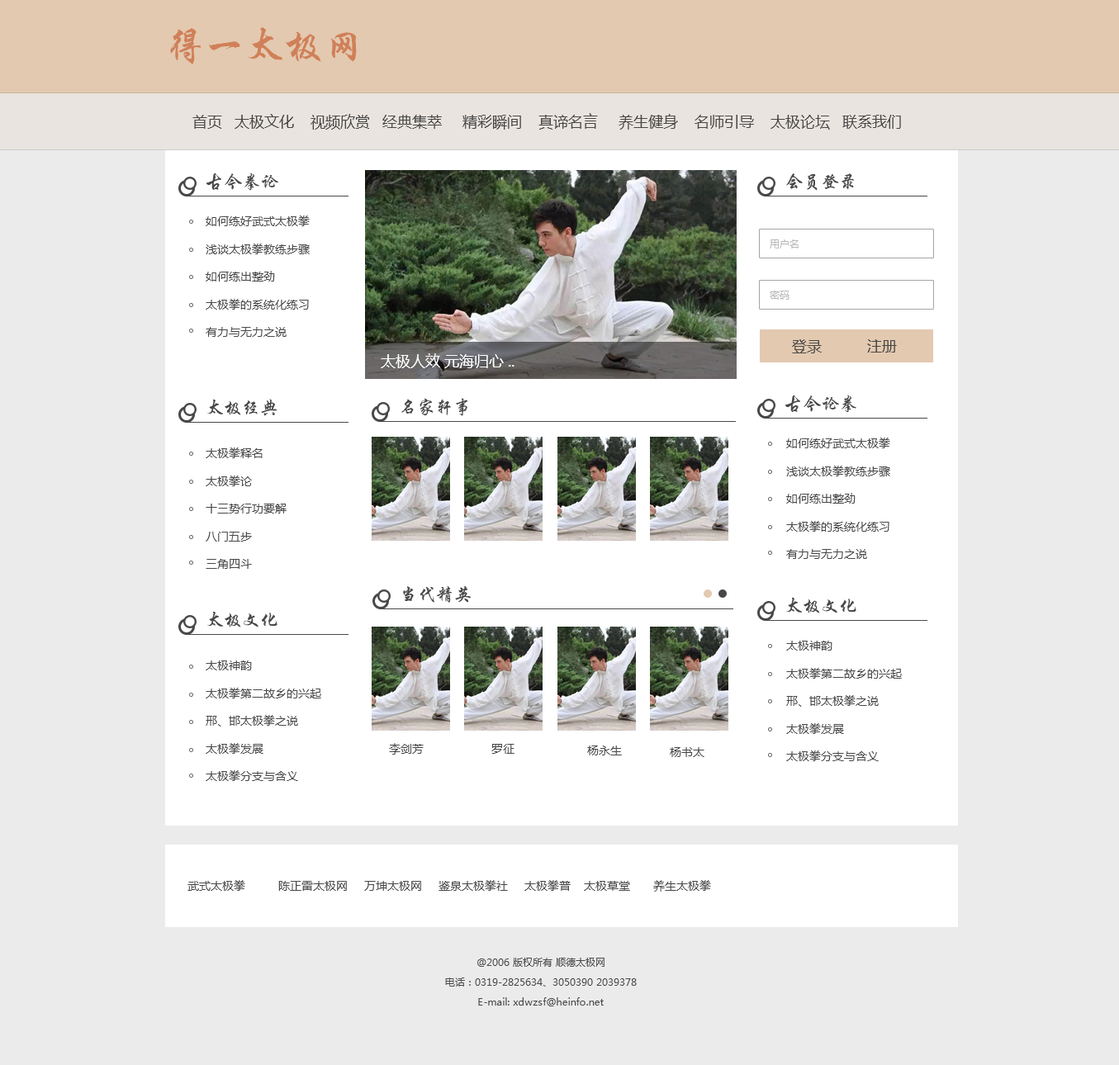
<style>
.page{position:relative;width:1119px;height:1065px;background:#ffffff}
.page>*{position:absolute;margin:0}
.t1{font:39.6px "FZXKJW--GB1-0";color:#d08058}
.t2{font:14.9px "MicrosoftYaHei";color:#484747}
.t3{font:18.2px "FZXKJW--GB1-0";color:#494848}
.t4{font:11.6px "MicrosoftYaHei";color:#494848}
.t5{font:9.9px "MicrosoftYaHei";color:#b7b7b7}
.t6{font:14.9px "MicrosoftYaHei";color:#ffffff}
.t7{font:9.9px/19.8px "MicrosoftYaHei";color:#494848}
</style>
<div class="page">
<p class="t1" style="left:170px;top:27px;width:187px;height:37px">得一太极网</p>
<p class="t2" style="left:192px;top:113px;width:709px;height:17px">首页   太极文化    视频欣赏   经典集萃     精彩瞬间    真谛名言     养生健身    名师引导    太极论坛   联系我们</p>
<p class="t3" style="left:206px;top:173px;width:72px;height:18px">古今拳论</p>
<p class="t3" style="left:786px;top:173px;width:68px;height:18px">会员登录</p>
<p class="t4" style="left:206px;top:216px;width:104px;height:121px">如何练好武式太极拳<br> <br>浅谈太极拳教练步骤<br> <br>如何练出整劲<br> <br>太极拳的系统化练习<br> <br>有力与无力之说</p>
<p class="t5" style="left:770px;top:240px;width:29px;height:9px">用户名</p>
<p class="t5" style="left:770px;top:291px;width:20px;height:9px">密码</p>
<p class="t2" style="left:792px;top:339px;width:30px;height:15px">登录</p>
<p class="t2" style="left:867px;top:339px;width:30px;height:14px">注册</p>
<p class="t6" style="left:381px;top:354px;width:134px;height:14px">太极人效 元海归心 ..</p>
<p class="t3" style="left:207px;top:399px;width:70px;height:17px">太极经典</p>
<p class="t3" style="left:401px;top:398px;width:67px;height:18px">名家轩事</p>
<p class="t3" style="left:785px;top:395px;width:72px;height:18px">古今论拳</p>
<p class="t4" style="left:786px;top:438px;width:104px;height:121px">如何练好武式太极拳<br> <br>浅谈太极拳教练步骤<br> <br>如何练出整劲<br> <br>太极拳的系统化练习<br> <br>有力与无力之说</p>
<p class="t4" style="left:206px;top:448px;width:81px;height:121px">太极拳释名<br><br>太极拳论<br><br>十三势行功要解<br><br>八门五步<br><br>三角四斗</p>
<p class="t3" style="left:403px;top:586px;width:68px;height:17px">当代精英</p>
<p class="t3" style="left:786px;top:597px;width:71px;height:17px">太极文化</p>
<p class="t3" style="left:207px;top:611px;width:71px;height:17px">太极文化</p>
<p class="t4" style="left:786px;top:641px;width:116px;height:121px">太极神韵<br> <br>太极拳第二故乡的兴起<br> <br>邢、邯太极拳之说<br> <br>太极拳发展<br> <br>太极拳分支与含义</p>
<p class="t4" style="left:206px;top:661px;width:115px;height:120px">太极神韵<br> <br>太极拳第二故乡的兴起<br> <br>邢、邯太极拳之说<br> <br>太极拳发展<br> <br>太极拳分支与含义</p>
<p class="t4" style="left:389px;top:743px;width:35px;height:12px">李剑芳</p>
<p class="t4" style="left:491px;top:744px;width:24px;height:10px">罗征</p>
<p class="t4" style="left:587px;top:746px;width:35px;height:10px">杨永生</p>
<p class="t4" style="left:670px;top:747px;width:35px;height:10px">杨书太</p>
<p class="t4" style="left:187px;top:880px;width:524px;height:12px">武式太极拳          陈正雷太极网     万坤太极网     鉴泉太极拳社     太极拳普    太极草堂       养生太极拳</p>
<p class="t7" style="left:445px;top:958px;width:192px;height:49px;text-align:center">@2006 版权所有 顺德太极网<br>电话：0319-2825634、3050390 2039378<br>E-mail: xdwzsf@heinfo.net</p>
</div>
